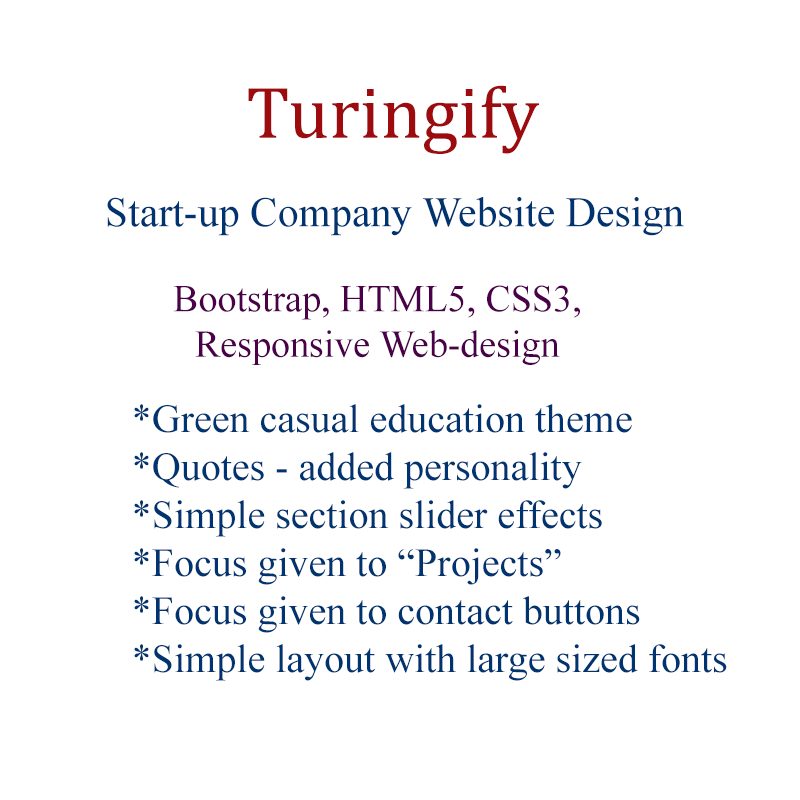
<style>
.page{position:relative;width:800px;height:800px;background:#ffffff}
.page>*{position:absolute;margin:0}
.t1{font:74px "Cambria";color:#9e0b0f}
.t2{font:42px "TimesNewRomanPSMT";color:#003471}
.t3{font:41.3px "TimesNewRomanPSMT";color:#000000}
.t4{font:38px "TimesNewRomanPSMT";color:#4b0049}
.t5{font:48px "TimesNewRomanPSMT";color:#003366}
.t6{font:40px "TimesNewRomanPSMT";color:#003471}
</style>
<div class="page">
<p class="t1" style="left:248px;top:85px;width:291px;height:69px">Turingify</p>
<p class="t2" style="left:107px;top:197px;width:577px;height:39px"><span class="t3">    </span>Start-up Company Website Design</p>
<p class="t4" style="left:173px;top:285px;width:407px;height:80px;text-align:center"><span class="t5">    </span>Bootstrap, HTML5, CSS3, <br>    Responsive Web-design</p>
<p class="t6" style="left:134px;top:404px;width:593px;height:277px">*Green casual education theme<br>*Quotes - added personality<br>*Simple section slider effects<br>*Focus given to “Projects”<br>*Focus given to contact buttons<br>*Simple layout with large sized fonts</p>
</div>
